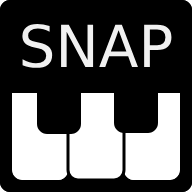
<style>
.page{position:relative;width:192px;height:192px;background:#000000}
.page>*{position:absolute;margin:0}
.t1{font:58px "DejaVuSans";color:#f1f1f1}
</style>
<div class="page">
<p class="t1" style="left:22px;top:23px;width:150px;height:45px">SNAP</p>
</div>
